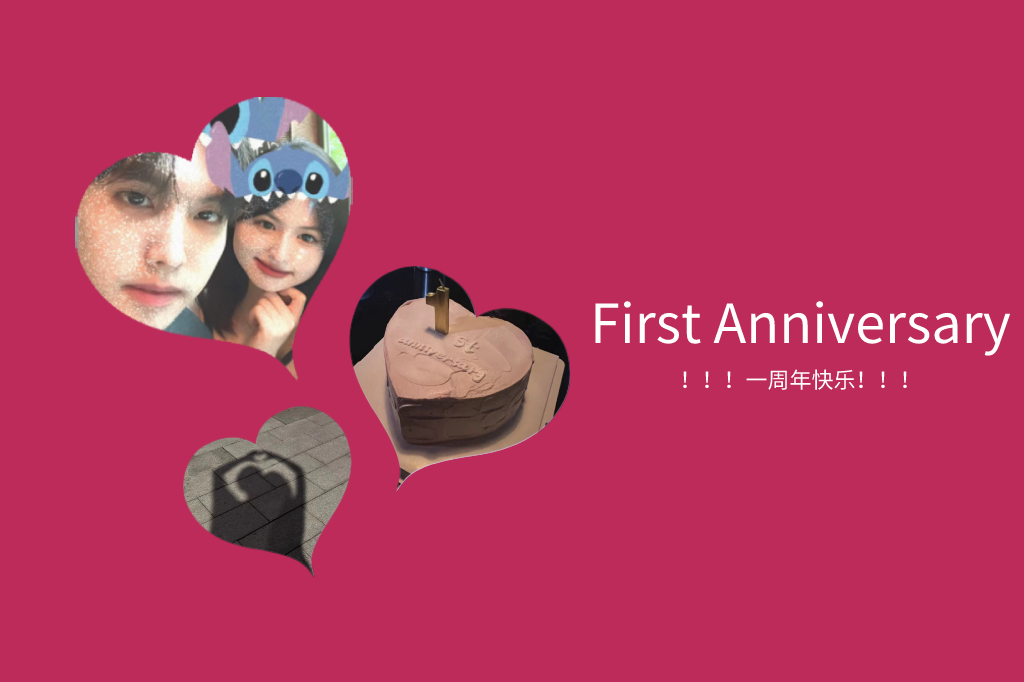
<style>
.page{position:relative;width:1024px;height:682px;background:#bc2b5a}
.page>*{position:absolute;margin:0}
.t1{font:54px "SourceHanSansSC-Regular";color:#ffffff}
.t2{font:22px "SourceHanSansSC-Regular";color:#ffffff}
</style>
<div class="page">
<p class="t1" style="left:595px;top:301px;width:416px;height:55px">First Anniversary</p>
<p class="t2" style="left:683px;top:369px;width:224px;height:21px">！！！一周年快乐！！！</p>
</div>
